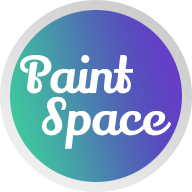
<style>
.page{position:relative;width:192px;height:192px;background:#ffffff}
.page>*{position:absolute;margin:0}
.t1{font:12px/41.7px "LilyScriptOne-Regular";color:#ffffff}
</style>
<div class="page">
<p class="t1" style="left:20px;top:55px;width:151px;height:94px">Paint<br> Space</p>
</div>
